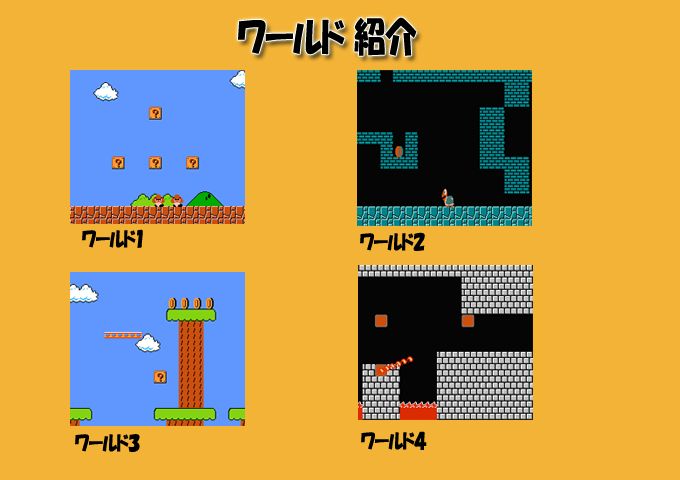
<style>
.page{position:relative;width:680px;height:480px;background:#f3b337}
.page>*{position:absolute;margin:0}
.t1{font:39.6px "HGPSoeiKakupoptai";letter-spacing:-0.015em;color:#000000;scale:0.82 1}
.t2{font:19.8px "HGPSoeiKakupoptai";letter-spacing:-0.015em;color:#000000;scale:0.82 1}
</style>
<div class="page">
<p class="t1" style="left:238px;top:17px;width:179px;height:39px">ワールド 紹介</p>
<p class="t2" style="left:82px;top:229px;width:61px;height:19px">ワールド１</p>
<p class="t2" style="left:360px;top:232px;width:65px;height:19px">ワールド２</p>
<p class="t2" style="left:75px;top:434px;width:65px;height:18px">ワールド３</p>
<p class="t2" style="left:361px;top:431px;width:66px;height:19px">ワールド４</p>
</div>
